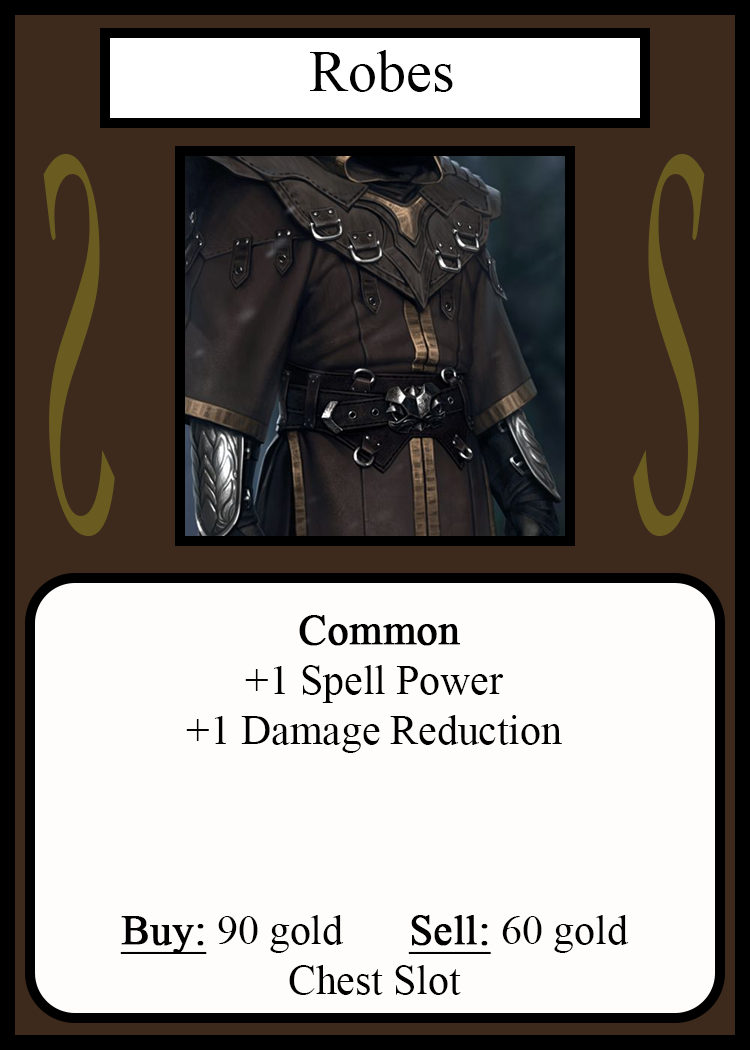
<style>
.page{position:relative;width:750px;height:1050px;background:#fffcfc}
.page>*{position:absolute;margin:0}
.t1{font:58.3px "TimesNewRomanPSMT";color:#010101}
.t2{font:548.5px "Apple-Chancery";color:#6a5c21;scale:0.27 1}
.t3{font:548.2px "Apple-Chancery";color:#6a5c21;scale:0.27 1}
.t4{font:41.7px "TimesNewRomanPSMT";color:#000000}
.t5{font:41.7px "TimesNewRomanPSMT";color:#000000;font-weight:bold}
.t6{font:41.7px "TimesNewRomanPSMT";color:#000000;font-weight:bold;text-decoration:underline}
</style>
<div class="page">
<p class="t1" style="left:310px;top:50px;width:143px;height:42px">Robes</p>
<p class="t2" style="left:43px;top:154px;width:72px;height:382px;rotate:180deg">S</p>
<p class="t3" style="left:633px;top:154px;width:72px;height:382px">S</p>
<p class="t4" style="left:120px;top:615px;width:509px;height:380px;text-align:center"><span class="t5">Common<br></span>+1 Spell Power<br>+1 Damage Reduction<br><br><br><br><span class="t6">Buy:</span> 90 gold   <span class="t6">Sell:</span> 60 gold<br>Chest Slot</p>
</div>
